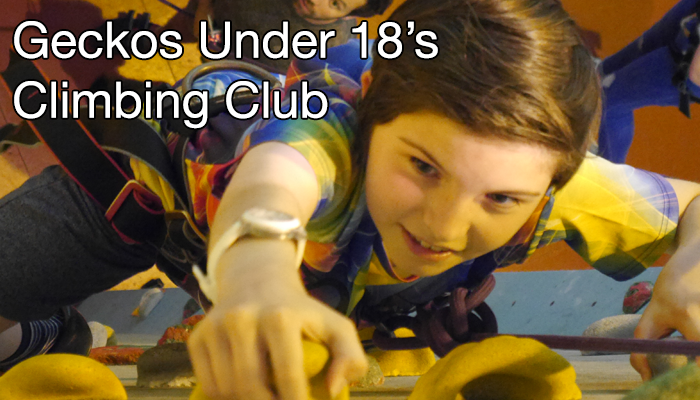
<style>
.page{position:relative;width:700px;height:400px}
.page>*{position:absolute;margin:0}
.t1{font:50px "HelveticaNeue";color:#ffffff}
</style>
<div class="page">
<p class="t1" style="left:14px;top:21px;width:424px;height:108px">Geckos Under 18’s <br>Climbing Club</p>
</div>
